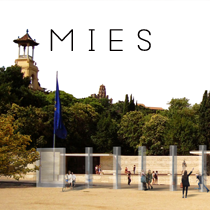
<style>
.page{position:relative;width:210px;height:210px;background:#ffffff}
.page>*{position:absolute;margin:0}
.t1{font:27px "SusannaRegular";letter-spacing:0.42em;color:#040000;font-weight:bold}
</style>
<div class="page">
<p class="t1" style="left:50px;top:29px;width:101px;height:22px">MIES</p>
</div>
